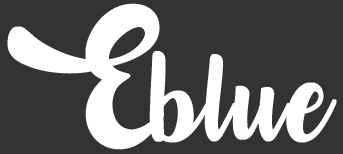
<style>
.page{position:relative;width:343px;height:154px;background:#333333}
.page>*{position:absolute;margin:0}
.t1{font:81.6px/10.3px "LostinWild-Regular";letter-spacing:-0.1em;color:#ffffff;font-weight:bold}
.t2{font:72px "LostinWild-Regular";letter-spacing:0.02em;color:#ffffff;font-weight:bold}
</style>
<div class="page">
<p class="t1" style="left:7px;top:3px;width:157px;height:147px;text-align:center">E</p>
<p class="t2" style="left:149px;top:51px;width:188px;height:92px">blue</p>
</div>
